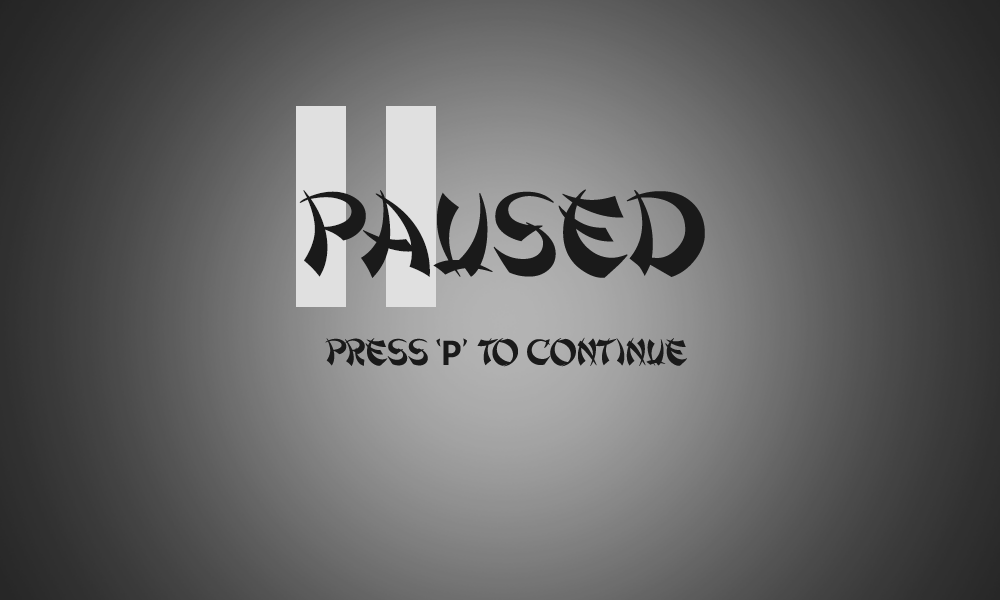
<style>
.page{position:relative;width:1000px;height:600px}
.page>*{position:absolute;margin:0}
.t1{font:121.4px "Shanghai";color:#1a1a1a}
.t2{font:37.9px "Shanghai";color:#1a1a1a}
.t3{font:37.9px "Consolas-Bold";color:#1a1a1a}
</style>
<div class="page">
<p class="t1" style="left:299px;top:189px;width:406px;height:89px">paused</p>
<p class="t2" style="left:325px;top:337px;width:362px;height:30px">pRESS ‘<span class="t3">P</span>’ TO CONTINUE</p>
</div>
